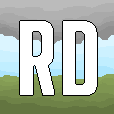
<style>
.page{position:relative;width:114px;height:114px;background:#ffffff}
.page>*{position:absolute;margin:0}
.t1{font:100px "BigNoodleTitling";letter-spacing:0.03em;color:#ffffff;font-weight:bold}
</style>
<div class="page">
<p class="t1" style="left:20px;top:21px;width:77px;height:74px">RD</p>
</div>
